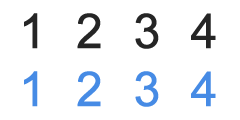
<style>
.page{position:relative;width:240px;height:120px;background:#ffffff}
.page>*{position:absolute;margin:0}
.t1{font:48px "ArialMT";color:#252525;font-weight:bold}
.t2{font:48px "ArialMT";color:#468be5;font-weight:bold}
</style>
<div class="page">
<p class="t1" style="left:24px;top:13px;width:192px;height:36px">1  2  3  4</p>
<p class="t2" style="left:24px;top:71px;width:192px;height:36px">1  2  3  4</p>
</div>
